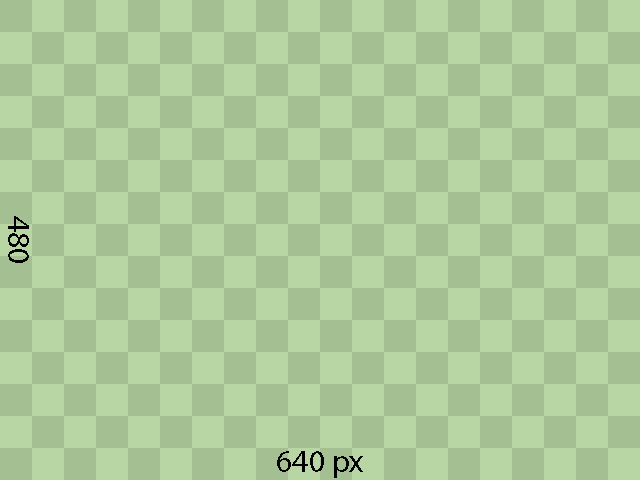
<style>
.page{position:relative;width:640px;height:480px;background:#a4c092}
.page>*{position:absolute;margin:0}
.t1{font:32px "MyriadPro-Regular";color:#000000}
</style>
<div class="page">
<p class="t1" style="left:8px;top:216px;width:21px;height:47px;rotate:90deg">480</p>
<p class="t1" style="left:277px;top:451px;width:86px;height:27px">640 px</p>
</div>
